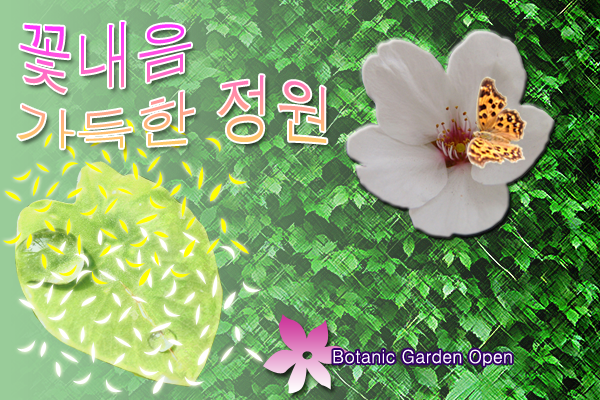
<style>
.page{position:relative;width:600px;height:400px}
.page>*{position:absolute;margin:0}
.t1{font:60px "Dotum"}
.t2{font:18px "Dotum";color:#ffffff}
</style>
<div class="page">
<p class="t1" style="left:18px;top:22px;width:309px;height:127px">꽃내음 <br>가득한 정원</p>
<p class="t2" style="left:333px;top:349px;width:179px;height:17px">Botanic Garden Open</p>
</div>
